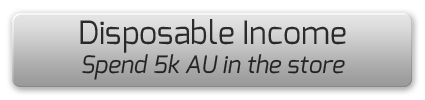
<style>
.page{position:relative;width:425px;height:100px}
.page>*{position:absolute;margin:0}
.t1{font:24px "Exo-Italic";color:#292929}
.t2{font:32px "Exo-Regular";color:#292929}
</style>
<div class="page">
<p class="t1" style="left:80px;top:19px;width:266px;height:61px;text-align:center"><span class="t2">Disposable Income<br></span>Spend 5k AU in the store</p>
</div>
